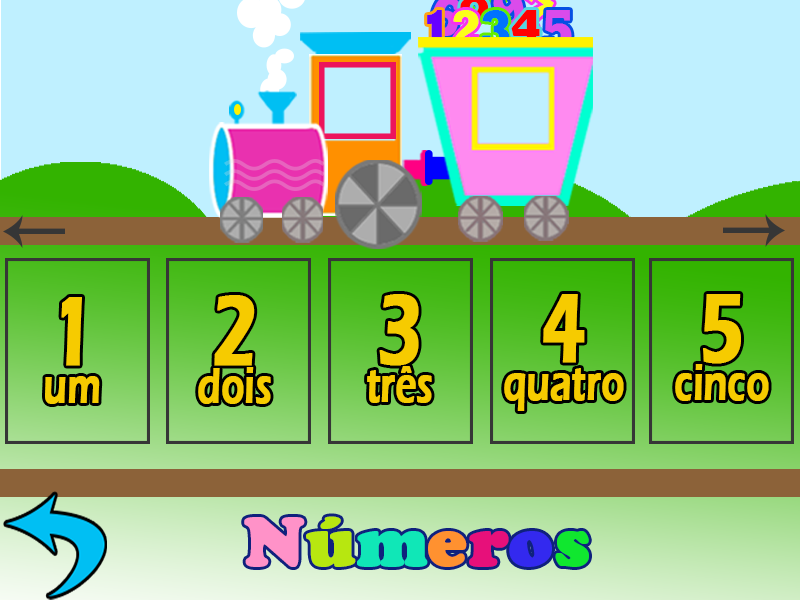
<style>
.page{position:relative;width:800px;height:600px;background:#bff0ff}
.page>*{position:absolute;margin:0}
.t1{font:13.6px/64.3px "Rockwell-ExtraBold";letter-spacing:-0.05em;scale:0.83 1}
.t2{font:13.6px/64.3px "Rockwell-ExtraBold";letter-spacing:-0.05em;color:#ff0000;scale:0.83 1}
.t3{font:50.6px/37.5px "ErasITC-Demi";letter-spacing:-0.01em;color:#f6cb00;font-weight:bold;scale:0.73 1}
.t4{font:101.3px/37.5px "ErasITC-Demi";letter-spacing:-0.01em;color:#f6cb00;font-weight:bold;scale:0.73 1}
</style>
<div class="page">
<p class="t1" style="left:427px;top:10px;width:20px;height:40px">1</p>
<p class="t1" style="left:453px;top:10px;width:26px;height:39px">2</p>
<p class="t1" style="left:482px;top:10px;width:28px;height:39px">3</p>
<p class="t2" style="left:511px;top:10px;width:29px;height:39px">4</p>
<p class="t1" style="left:543px;top:10px;width:29px;height:39px">5</p>
<p class="t3" style="left:367px;top:294px;width:65px;height:109px;text-align:center"><span class="t4">3<br></span>três</p>
<p class="t3" style="left:504px;top:294px;width:120px;height:117px;text-align:center"><span class="t4">4<br></span>quatro</p>
<p class="t3" style="left:675px;top:294px;width:94px;height:107px;text-align:center"><span class="t4">5<br></span>cinco</p>
<p class="t3" style="left:45px;top:297px;width:55px;height:107px;text-align:center"><span class="t4">1<br></span>um</p>
<p class="t3" style="left:198px;top:295px;width:73px;height:109px;text-align:center"><span class="t4">2<br></span>dois</p>
</div>
